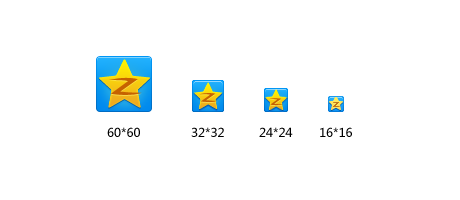
<style>
.page{position:relative;width:460px;height:200px;background:#ffffff}
.page>*{position:absolute;margin:0}
.t1{font:12px "MicrosoftYaHei";color:#000000}
</style>
<div class="page">
<p class="t1" style="left:107px;top:127px;width:33px;height:10px">60*60</p>
<p class="t1" style="left:191px;top:127px;width:33px;height:10px">32*32</p>
<p class="t1" style="left:259px;top:127px;width:34px;height:10px">24*24</p>
<p class="t1" style="left:320px;top:127px;width:32px;height:10px">16*16</p>
</div>
